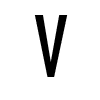
<style>
.page{position:relative;width:100px;height:100px;background:#ffffff}
.page>*{position:absolute;margin:0}
.t1{font:100px "TwCenMT-Condensed";color:#000000}
</style>
<div class="page">
<p class="t1" style="left:34px;top:15px;width:34px;height:62px">V</p>
</div>
